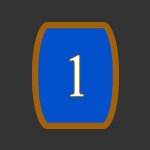
<style>
.page{position:relative;width:150px;height:150px;background:#333333}
.page>*{position:absolute;margin:0}
.t1{font:62.5px "TimesNewRomanPSMT";letter-spacing:0.1em;color:#ffffff;scale:0.75 1}
</style>
<div class="page">
<p class="t1" style="left:70px;top:55px;width:14px;height:41px">1</p>
</div>
